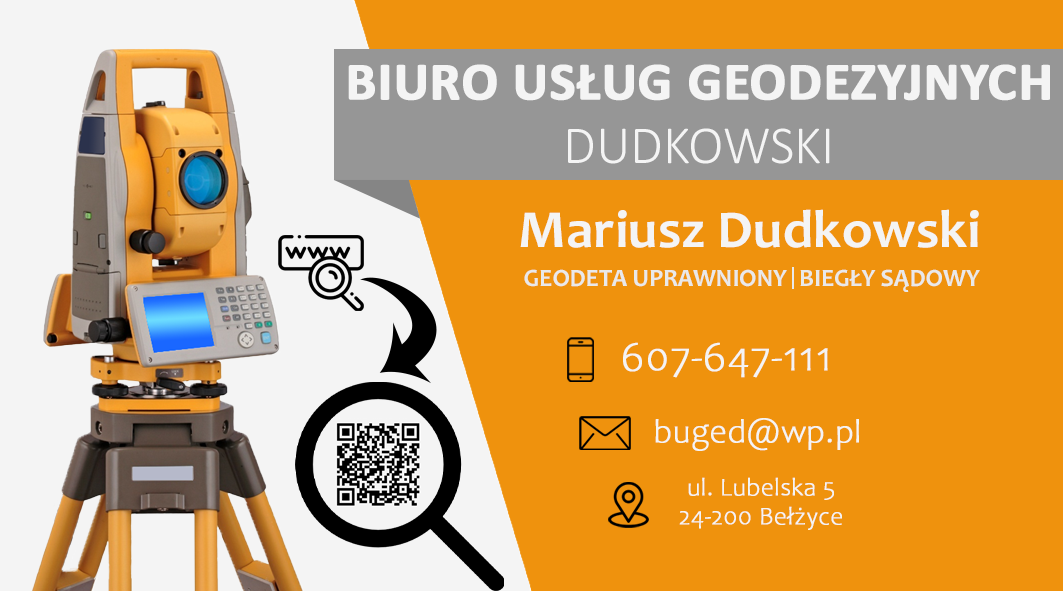
<style>
.page{position:relative;width:1063px;height:591px;background:#ef920d}
.page>*{position:absolute;margin:0}
.t1{font:54px "Calibri-Bold";color:#f4f4f4;font-weight:bold}
.t2{font:54px "Calibri-Light";color:#f4f4f4}
.t3{font:54px "Candara-Bold";color:#f4f4f4}
.t4{font:24.9px "Candara-Bold";color:#e9e9e9}
.t5{font:41.5px "Candara-Light";color:#f4f4f4;font-weight:bold}
.t6{font:33.2px "Candara-Light";color:#f4f4f4;font-weight:bold}
.t7{font:24.9px "Candara-Light";color:#f4f4f4;font-weight:bold}
</style>
<div class="page">
<p class="t1" style="left:348px;top:64px;width:702px;height:100px;text-align:center">BIURO USŁUG GEODEZYJNYCH <span class="t2">DUDKOWSKI</span></p>
<p class="t3" style="left:520px;top:209px;width:459px;height:39px">Mariusz Dudkowski</p>
<p class="t4" style="left:524px;top:269px;width:263px;height:18px">GEODETA UPRAWNIONY</p>
<p class="t4" style="left:800px;top:269px;width:180px;height:23px">BIEGŁY SĄDOWY</p>
<p class="t5" style="left:623px;top:342px;width:205px;height:36px">607-647-111</p>
<p class="t6" style="left:655px;top:418px;width:204px;height:33px">buged@wp.pl</p>
<p class="t7" style="left:679px;top:477px;width:163px;height:53px;text-align:center">ul. Lubelska 5<br>24-200 Bełżyce</p>
</div>
